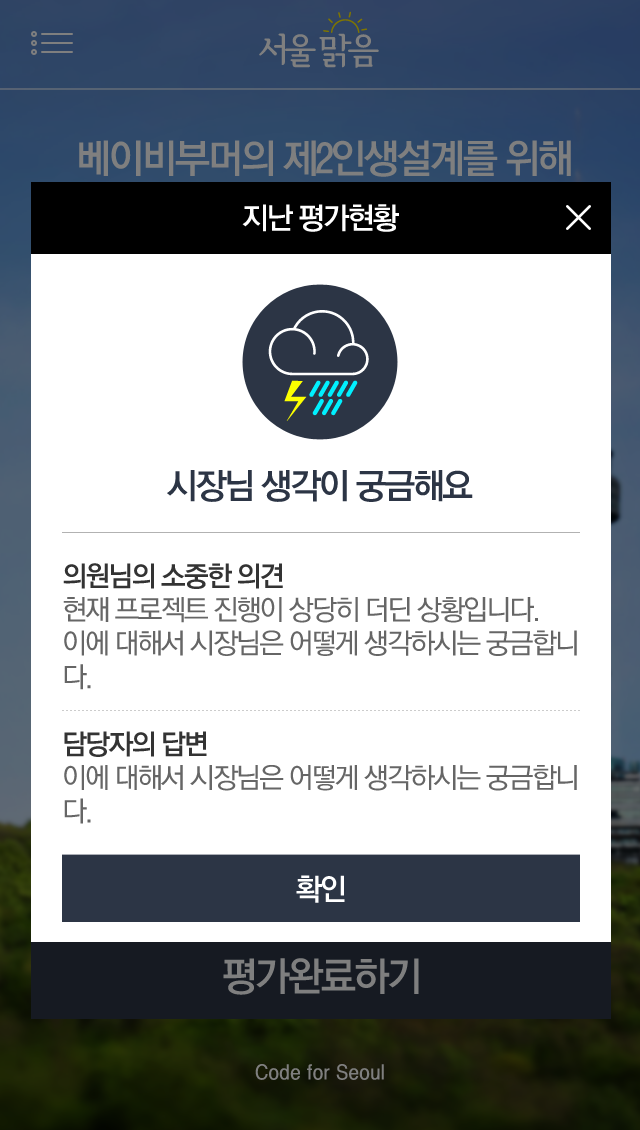
<style>
.page{position:relative;width:640px;height:1130px;background:#ffffff}
.page>*{position:absolute;margin:0}
.t1{font:30px "YGO540";letter-spacing:-0.075em;color:#ffffff}
.t2{font:35px "YGO540";letter-spacing:-0.075em;color:#2c3545}
.t3{font:28px "YGO530";letter-spacing:-0.075em;color:#666666}
.t4{font:28px "YGO540";letter-spacing:-0.075em;color:#333333}
</style>
<div class="page">
<p class="t1" style="left:242px;top:204px;width:157px;height:28px">지난 평가현황</p>
<p class="t2" style="left:167px;top:470px;width:306px;height:32px">시장님 생각이 궁금해요</p>
<p class="t3" style="left:63px;top:563px;width:514px;height:127px;text-align:justify"><span class="t4">의원님의 소중한 의견<br></span>현재 프로젝트 진행이 상당히 더딘 상황입니다. <br>이에 대해서 시장님은 어떻게 생각하시는 궁금합니 다.</p>
<p class="t3" style="left:64px;top:731px;width:513px;height:93px;text-align:justify"><span class="t4">담당자의 답변<br></span>이에 대해서 시장님은 어떻게 생각하시는 궁금합니 다.</p>
<p class="t1" style="left:296px;top:875px;width:49px;height:28px">확인</p>
</div>
